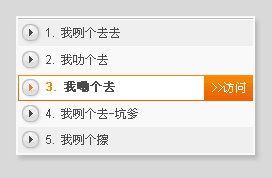
<style>
.page{position:relative;width:272px;height:178px;background:#f9f9f9}
.page>*{position:absolute;margin:0}
.t1{font:12px "SimSun";color:#4a4a4a}
.t2{font:12px "ArialMT";color:#4a4a4a}
.t3{font:12px "SimSun";color:#4a4a4a;font-weight:bold}
.t4{font:12px "ArialMT";color:#ff8400;font-weight:bold}
.t5{font:12px "SimSun";color:#ffffff}
</style>
<div class="page">
<p class="t1" style="left:46px;top:27px;width:74px;height:11px"><span class="t2">1.</span> 我咧个去去</p>
<p class="t1" style="left:46px;top:54px;width:62px;height:11px"><span class="t2">2.</span> 我叻个去</p>
<p class="t3" style="left:46px;top:81px;width:69px;height:11px"><span class="t4">3.</span> 我嘞个去</p>
<p class="t5" style="left:212px;top:82px;width:34px;height:11px">&gt;&gt;访问</p>
<p class="t1" style="left:46px;top:108px;width:92px;height:11px"><span class="t2">4.</span> 我咧个去-坑爹</p>
<p class="t1" style="left:46px;top:134px;width:62px;height:11px"><span class="t2">5.</span> 我咧个擦</p>
</div>
